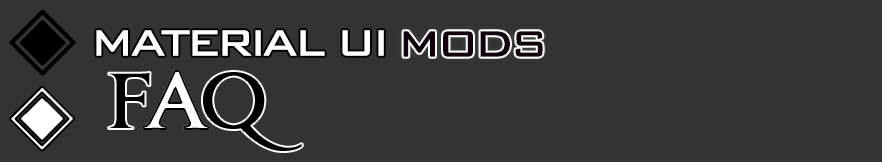
<style>
.page{position:relative;width:882px;height:162px;background:#333333}
.page>*{position:absolute;margin:0}
.t1{font:72px "Gulim";letter-spacing:-0.1em;color:#000000;font-weight:bold}
.t2{font:48px "BankGothic";letter-spacing:-0.1em;color:#ffffff;font-weight:bold}
.t3{font:48px "BankGothic";letter-spacing:-0.1em;color:#100010;font-weight:bold}
.t4{font:48px "BankGothic";letter-spacing:-0.1em;color:#c71632;font-weight:bold}
.t5{font:72px "JupiterPro-Bold";letter-spacing:-0.1em;color:#ffffff;font-weight:bold}
.t6{font:69px "Gulim";letter-spacing:-0.1em;color:#ffffff;font-weight:bold}
</style>
<div class="page">
<p class="t1" style="left:9px;top:9px;width:67px;height:67px">◈</p>
<p class="t2" style="left:96px;top:30px;width:288px;height:26px">MATERIAL UI</p>
<p class="t3" style="left:403px;top:31px;width:140px;height:26px"><span class="t4">                     </span>MODS</p>
<p class="t5" style="left:143px;top:71px;width:66px;height:58px">A</p>
<p class="t6" style="left:10px;top:87px;width:64px;height:64px">◈</p>
</div>
